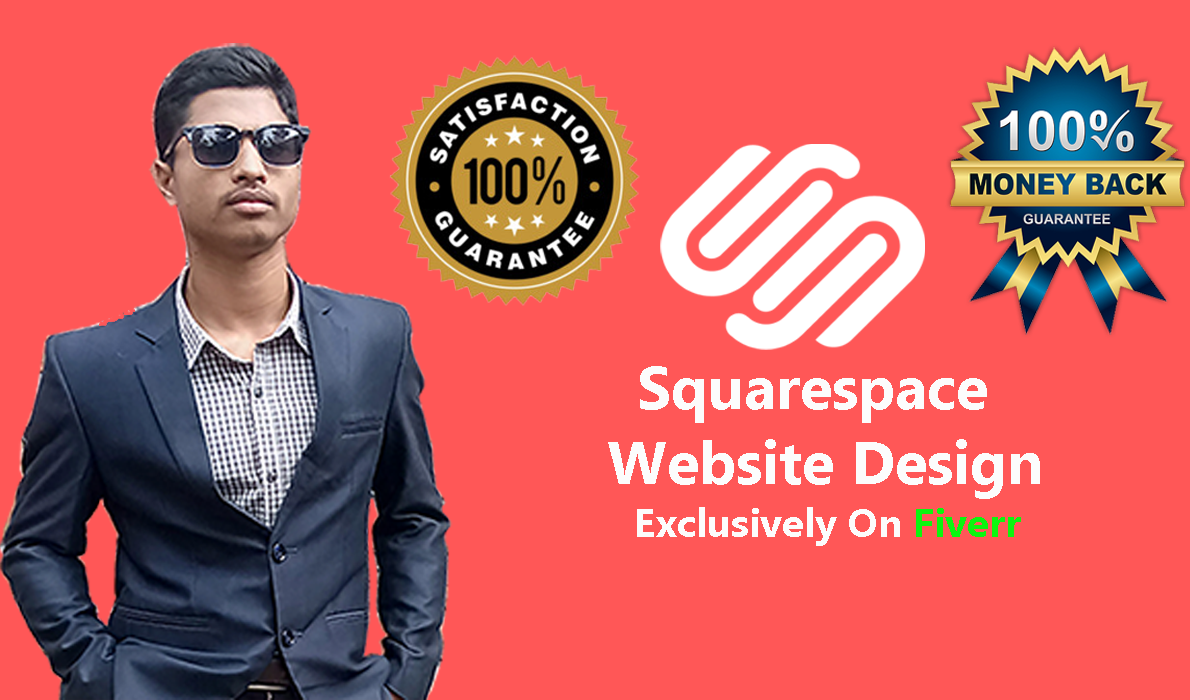
<style>
.page{position:relative;width:1190px;height:700px;background:#ff5757}
.page>*{position:absolute;margin:0}
.t1{font:60px "Ebrima-Bold";color:#fcfcfc}
.t2{font:40px "Ebrima-Bold";color:#fcfcfc}
.t3{font:40px "Ebrima-Bold";color:#0bf60f}
</style>
<div class="page">
<p class="t1" style="left:640px;top:366px;width:347px;height:57px">Squarespace</p>
<p class="t1" style="left:608px;top:439px;width:432px;height:60px">Website Design</p>
<p class="t2" style="left:637px;top:507px;width:384px;height:39px">Exclusively On <span class="t3">Fiverr</span></p>
</div>
